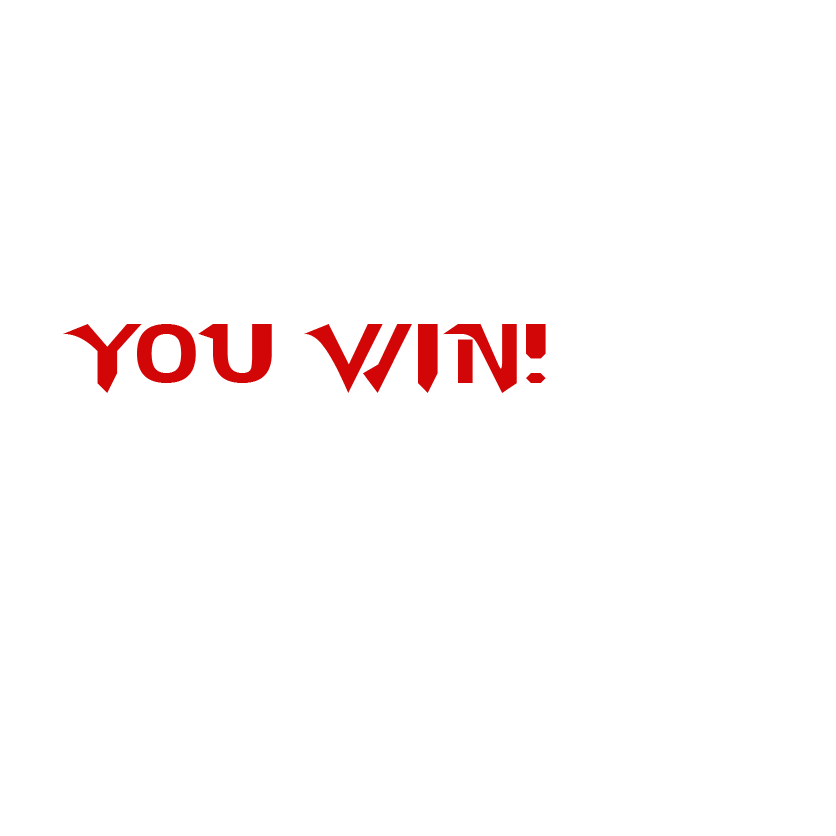
<style>
.page{position:relative;width:836px;height:836px;background:#ffffff}
.page>*{position:absolute;margin:0}
.t1{font:83.7px "StarcraftNormal";color:#d20606}
</style>
<div class="page">
<p class="t1" style="left:63px;top:324px;width:483px;height:69px">You Win!</p>
</div>
